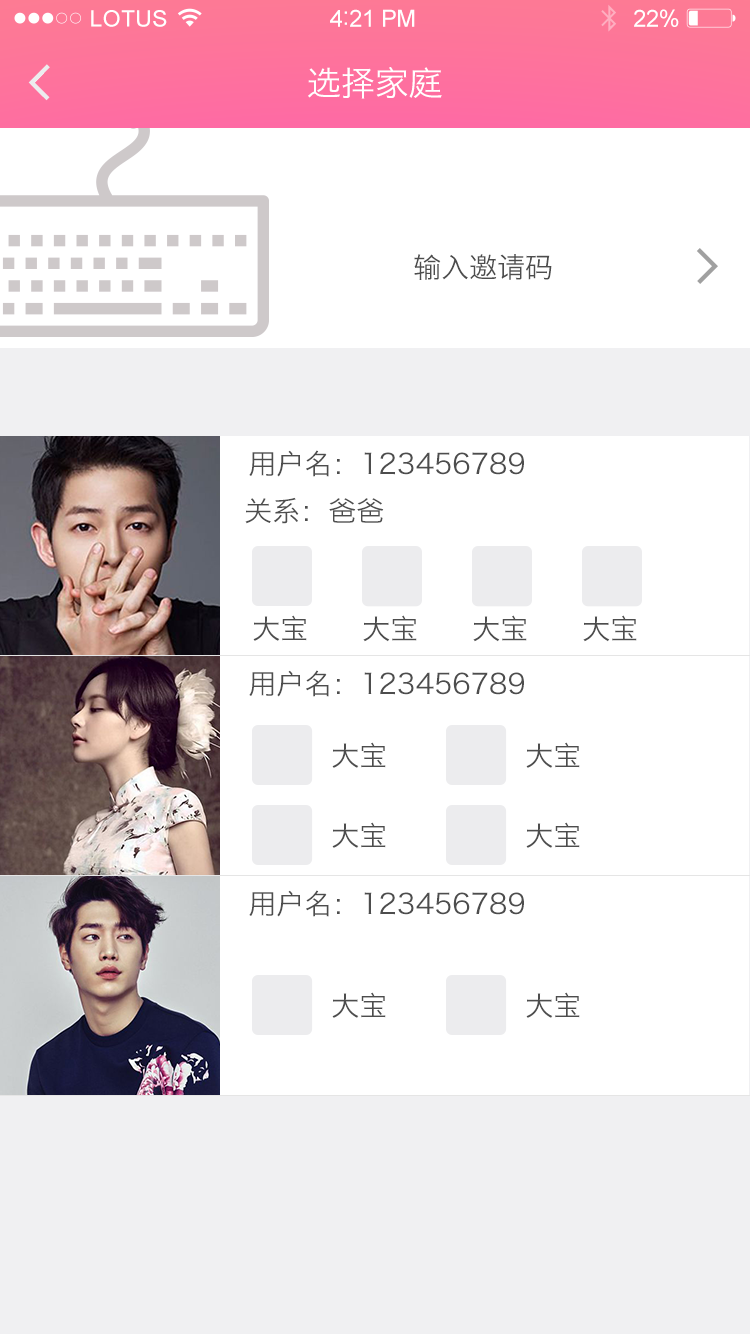
<style>
.page{position:relative;width:750px;height:1334px;background:#ffffff}
.page>*{position:absolute;margin:0}
.t1{font:22.6px "ArialMT";letter-spacing:0.02em;color:#ffffff}
.t2{font:23.6px "ArialMT";letter-spacing:-0.02em;color:#ffffff}
.t3{font:25.6px "ArialMT";letter-spacing:-0.02em;color:#ffffff}
.t4{font:34px "HiraginoSansGB-W3";color:#ffffff}
.t5{font:28px "HiraginoSansGB-W3";color:#4d4d4d}
.t6{font:28.1px "HiraginoSansGB-W3";color:#4d4d4d}
</style>
<div class="page">
<p class="t1" style="left:91px;top:10px;width:76px;height:17px">LOTUS</p>
<p class="t2" style="left:330px;top:9px;width:85px;height:18px">4<span class="t3">:</span>21 PM</p>
<p class="t2" style="left:634px;top:9px;width:45px;height:18px">22%</p>
<p class="t4" style="left:308px;top:67px;width:134px;height:32px">选择家庭</p>
<p class="t5" style="left:414px;top:254px;width:138px;height:26px">输入邀请码</p>
<p class="t5" style="left:249px;top:450px;width:275px;height:27px">用户名：123456789</p>
<p class="t5" style="left:245px;top:497px;width:139px;height:27px">关系：爸爸</p>
<p class="t5" style="left:253px;top:615px;width:54px;height:26px">大宝</p>
<p class="t6" style="left:363px;top:615px;width:54px;height:27px">大宝</p>
<p class="t6" style="left:473px;top:615px;width:54px;height:27px">大宝</p>
<p class="t6" style="left:583px;top:615px;width:54px;height:27px">大宝</p>
<p class="t5" style="left:249px;top:670px;width:275px;height:27px">用户名：123456789</p>
<p class="t5" style="left:332px;top:742px;width:54px;height:26px">大宝</p>
<p class="t5" style="left:526px;top:742px;width:54px;height:26px">大宝</p>
<p class="t5" style="left:332px;top:822px;width:54px;height:26px">大宝</p>
<p class="t5" style="left:526px;top:822px;width:54px;height:26px">大宝</p>
<p class="t5" style="left:249px;top:890px;width:275px;height:27px">用户名：123456789</p>
<p class="t5" style="left:332px;top:992px;width:54px;height:26px">大宝</p>
<p class="t5" style="left:526px;top:992px;width:54px;height:26px">大宝</p>
</div>
